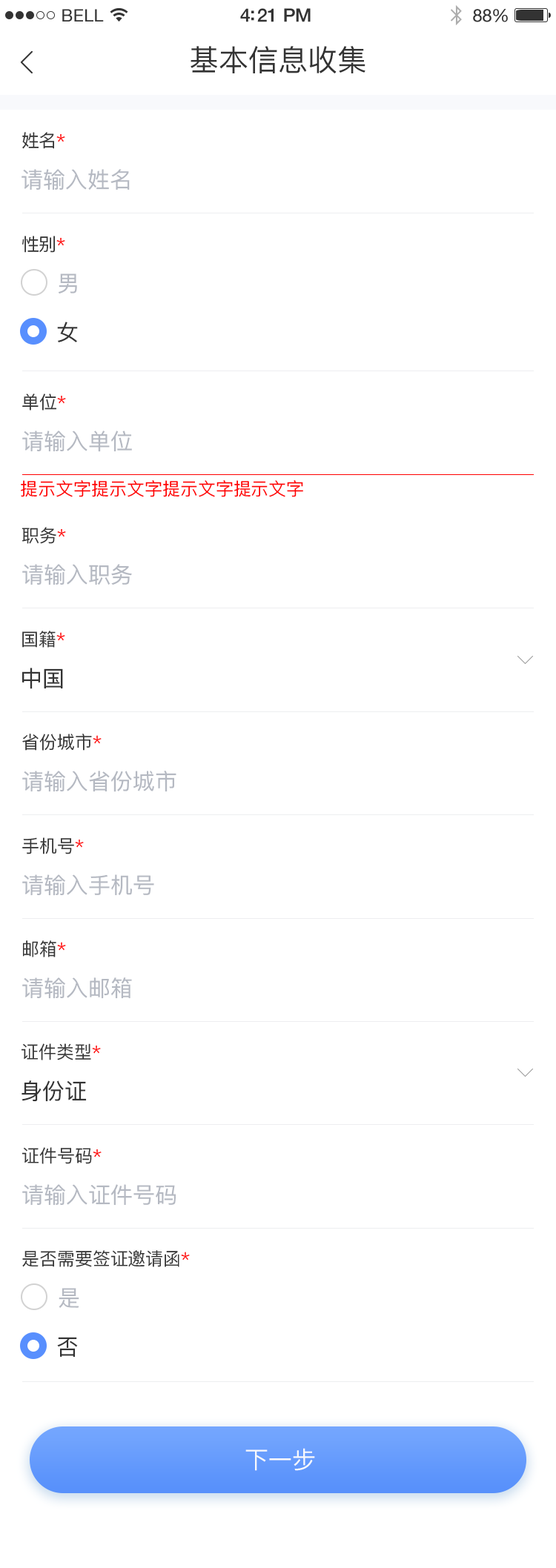
<style>
.page{position:relative;width:556px;height:1568px;background:#ffffff}
.page>*{position:absolute;margin:0}
.t1{font:17px "HelveticaNeue";letter-spacing:0.02em;color:#333333}
.t2{font:18.5px "HelveticaNeue-Medium";letter-spacing:-0.02em;color:#333333}
.t3{font:17.8px "HelveticaNeue";letter-spacing:-0.02em;color:#333333}
.t4{font:29.6px "PingFangSC-Regular";color:#333333}
.t5{font:17.8px "PingFangSC-Regular";color:#333333}
.t6{font:17.8px "PingFangSC-Regular";color:#ff0000}
.t7{font:22.2px "PingFangSC-Regular";color:#b5b9c2}
.t8{font:22.2px "PingFangSC-Regular";color:#333333}
.t9{font:22.3px "PingFangSC-Regular";color:#333333}
.t10{font:22.3px "PingFangSC-Regular";color:#b5b9c2}
.t11{font:17.7px "PingFangSC-Regular";color:#333333}
.t12{font:17.7px "PingFangSC-Regular";color:#ff0000}
.t13{font:23.7px "PingFangSC-Regular";color:#f8f9fc}
</style>
<div class="page">
<p class="t1" style="left:62px;top:9px;width:42px;height:12px">BELL</p>
<p class="t2" style="left:240px;top:8px;width:70px;height:14px">4:21 PM</p>
<p class="t3" style="left:473px;top:9px;width:35px;height:13px">88%</p>
<p class="t4" style="left:190px;top:46px;width:175px;height:28px">基本信息收集</p>
<p class="t5" style="left:22px;top:132px;width:43px;height:17px">姓名<span class="t6">*</span></p>
<p class="t7" style="left:21px;top:169px;width:109px;height:21px">请输入姓名</p>
<p class="t5" style="left:22px;top:236px;width:43px;height:17px">性别<span class="t6">*</span></p>
<p class="t7" style="left:59px;top:273px;width:18px;height:20px">男</p>
<p class="t8" style="left:57px;top:322px;width:21px;height:20px">女</p>
<p class="t5" style="left:22px;top:393px;width:44px;height:18px">单位<span class="t6">*</span></p>
<p class="t7" style="left:22px;top:431px;width:110px;height:21px">请输入单位</p>
<p class="t6" style="left:21px;top:480px;width:282px;height:17px">提示文字提示文字提示文字提示文字</p>
<p class="t5" style="left:22px;top:527px;width:44px;height:17px">职务<span class="t6">*</span></p>
<p class="t7" style="left:22px;top:564px;width:110px;height:21px">请输入职务</p>
<p class="t5" style="left:22px;top:631px;width:43px;height:17px">国籍<span class="t6">*</span></p>
<p class="t9" style="left:22px;top:668px;width:41px;height:21px">中国</p>
<p class="t5" style="left:22px;top:734px;width:80px;height:17px">省份城市<span class="t6">*</span></p>
<p class="t10" style="left:22px;top:771px;width:154px;height:21px">请输入省份城市</p>
<p class="t11" style="left:22px;top:837px;width:62px;height:17px">手机号<span class="t12">*</span></p>
<p class="t7" style="left:22px;top:874px;width:132px;height:22px">请输入手机号</p>
<p class="t5" style="left:23px;top:940px;width:43px;height:17px">邮箱<span class="t6">*</span></p>
<p class="t10" style="left:22px;top:977px;width:110px;height:22px">请输入邮箱</p>
<p class="t5" style="left:21px;top:1043px;width:80px;height:17px">证件类型<span class="t6">*</span></p>
<p class="t8" style="left:21px;top:1080px;width:66px;height:22px">身份证</p>
<p class="t11" style="left:22px;top:1147px;width:80px;height:17px">证件号码<span class="t12">*</span></p>
<p class="t7" style="left:22px;top:1184px;width:154px;height:22px">请输入证件号码</p>
<p class="t5" style="left:22px;top:1250px;width:168px;height:17px">是否需要签证邀请函<span class="t6">*</span></p>
<p class="t10" style="left:59px;top:1288px;width:20px;height:20px">是</p>
<p class="t8" style="left:57px;top:1337px;width:21px;height:20px">否</p>
<p class="t13" style="left:245px;top:1448px;width:70px;height:23px">下一步</p>
</div>
